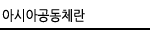
<style>
.page{position:relative;width:150px;height:30px;background:#ffffff}
.page>*{position:absolute;margin:0}
.t1{font:14px "NanumGothic";color:#000000;scale:0.9 1}
</style>
<div class="page">
<p class="t1" style="left:2px;top:9px;width:83px;height:14px">아시아공동체란</p>
</div>
